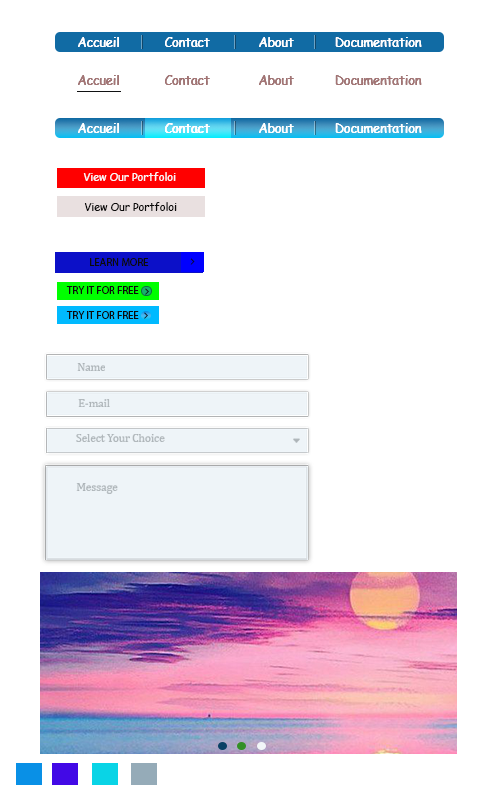
<style>
.page{position:relative;width:500px;height:790px;background:#ffffff}
.page>*{position:absolute;margin:0}
.t1{font:12.5px "ComicSansMS";color:#ffffff}
.t2{font:12.5px "ComicSansMS";color:#a57575}
.t3{font:10.7px "ComicSansMS";color:#f8f7f7}
.t4{font:10.7px "ComicSansMS";color:#0c0b0b}
.t5{font:10.7px "MyriadPro-Regular";color:#0c0b0b}
</style>
<div class="page">
<p class="t1" style="left:78px;top:37px;width:344px;height:10px">Accueil            Contact             About           Documentation</p>
<p class="t1" style="left:78px;top:37px;width:344px;height:10px">Accueil            Contact             About           Documentation</p>
<p class="t2" style="left:78px;top:75px;width:344px;height:10px">Accueil            Contact             About           Documentation</p>
<p class="t2" style="left:78px;top:75px;width:344px;height:10px">Accueil            Contact             About           Documentation</p>
<p class="t1" style="left:78px;top:123px;width:344px;height:10px">Accueil            Contact             About           Documentation</p>
<p class="t1" style="left:78px;top:123px;width:344px;height:10px">Accueil            Contact             About           Documentation</p>
<p class="t3" style="left:83px;top:172px;width:93px;height:9px">View Our Portfoloi</p>
<p class="t4" style="left:84px;top:202px;width:93px;height:9px">View Our Portfoloi</p>
<p class="t5" style="left:90px;top:258px;width:59px;height:8px">LEARN MORE</p>
<p class="t5" style="left:66px;top:286px;width:73px;height:8px">TRY IT FOR FREE</p>
<p class="t5" style="left:66px;top:311px;width:73px;height:8px">TRY IT FOR FREE</p>
</div>
